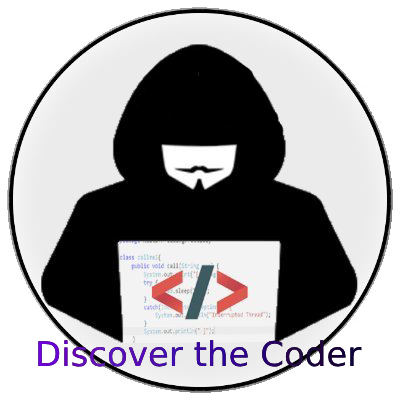
<style>
.page{position:relative;width:400px;height:400px;background:#ffffff}
.page>*{position:absolute;margin:0}
.t1{font:34px "DejaVuSans"}
</style>
<div class="page">
<p class="t1" style="left:38px;top:340px;width:324px;height:27px">Discover the Coder</p>
</div>
